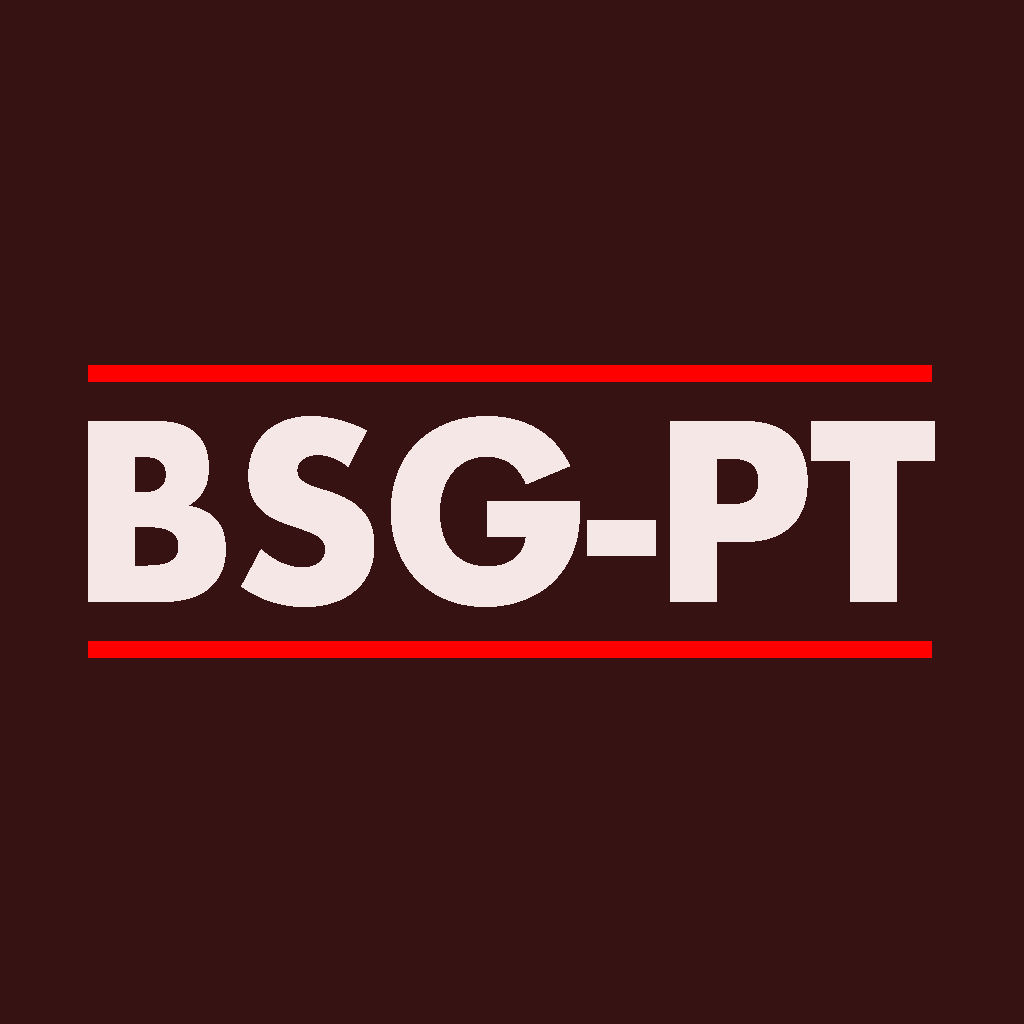
<style>
.page{position:relative;width:1024px;height:1024px;background:#361212}
.page>*{position:absolute;margin:0}
.t1{font:240px "Futura-Bold";letter-spacing:-0.02em;color:#f6e7e7}
</style>
<div class="page">
<p class="t1" style="left:88px;top:416px;width:847px;height:191px">BSG-PT</p>
</div>
